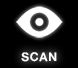
<style>
.page{position:relative;width:78px;height:68px;background:#000000}
.page>*{position:absolute;margin:0}
.t1{font:12.1px "AlteHaasGrotesk_Bold";letter-spacing:0.05em;color:#ffffff}
</style>
<div class="page">
<p class="t1" style="left:21px;top:52px;width:36px;height:10px">SCAN</p>
</div>
